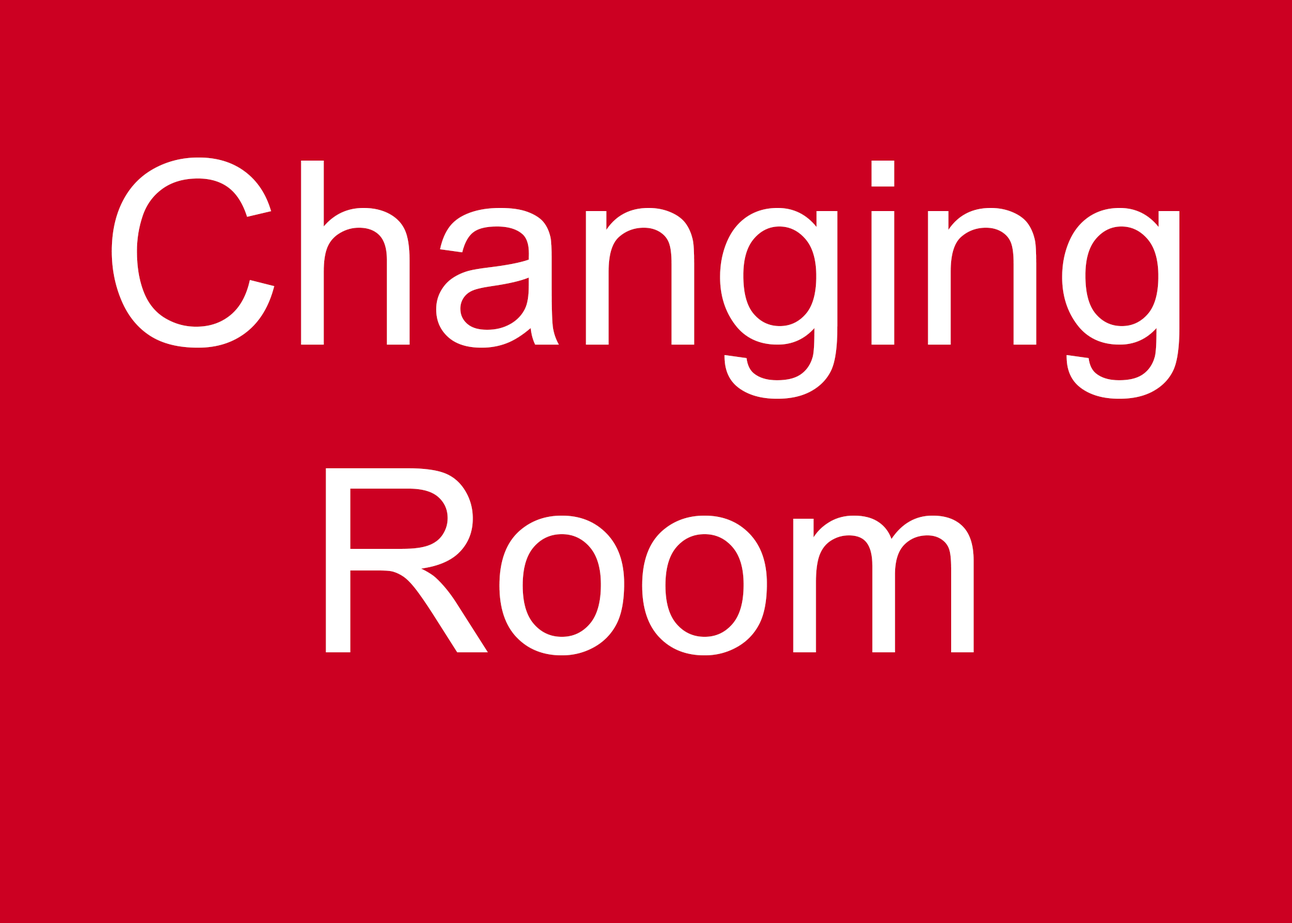
<style>
.page{position:relative;width:1292px;height:923px;background:#cc0022}
.page>*{position:absolute;margin:0}
.t1{font:256.4px "ArialMT";color:#ffffff}
</style>
<div class="page">
<p class="t1" style="left:111px;top:158px;width:1068px;height:497px;text-align:center">Changing<br>Room</p>
</div>
